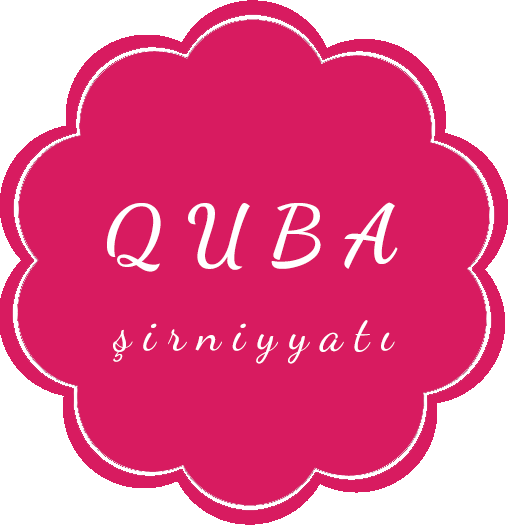
<style>
.page{position:relative;width:508px;height:529px;background:#d81b60}
.page>*{position:absolute;margin:0}
.t1{font:81.7px "DancingScript-Bold";letter-spacing:0.25em;color:#ffffff;scale:1.04 1}
.t2{font:49.5px "DancingScript-Regular";letter-spacing:0.25em;color:#ffffff}
</style>
<div class="page">
<p class="t1" style="left:107px;top:202px;width:291px;height:70px">QUBA</p>
<p class="t2" style="left:113px;top:320px;width:282px;height:44px">şirniyyatı</p>
</div>
